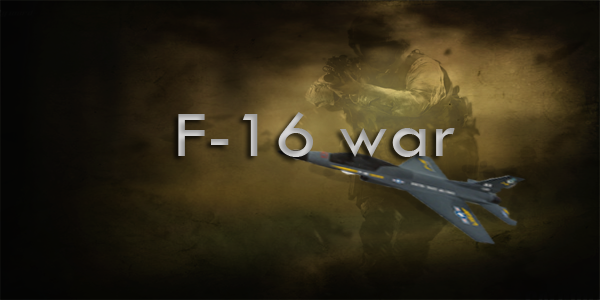
<style>
.page{position:relative;width:600px;height:300px}
.page>*{position:absolute;margin:0}
.t1{font:67.3px "TwCenMT-Regular";color:#b7b6b5;scale:1.13 1}
</style>
<div class="page">
<p class="t1" style="left:178px;top:112px;width:277px;height:45px">F-16 war</p>
</div>
